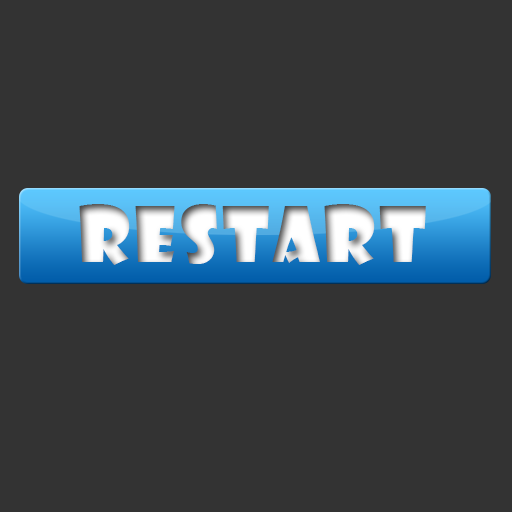
<style>
.page{position:relative;width:512px;height:512px;background:#333333}
.page>*{position:absolute;margin:0}
.t1{font:75.1px "ShowcardGothic-Reg";letter-spacing:0.05em}
</style>
<div class="page">
<p class="t1" style="left:79px;top:204px;width:347px;height:61px">RESTART</p>
</div>
